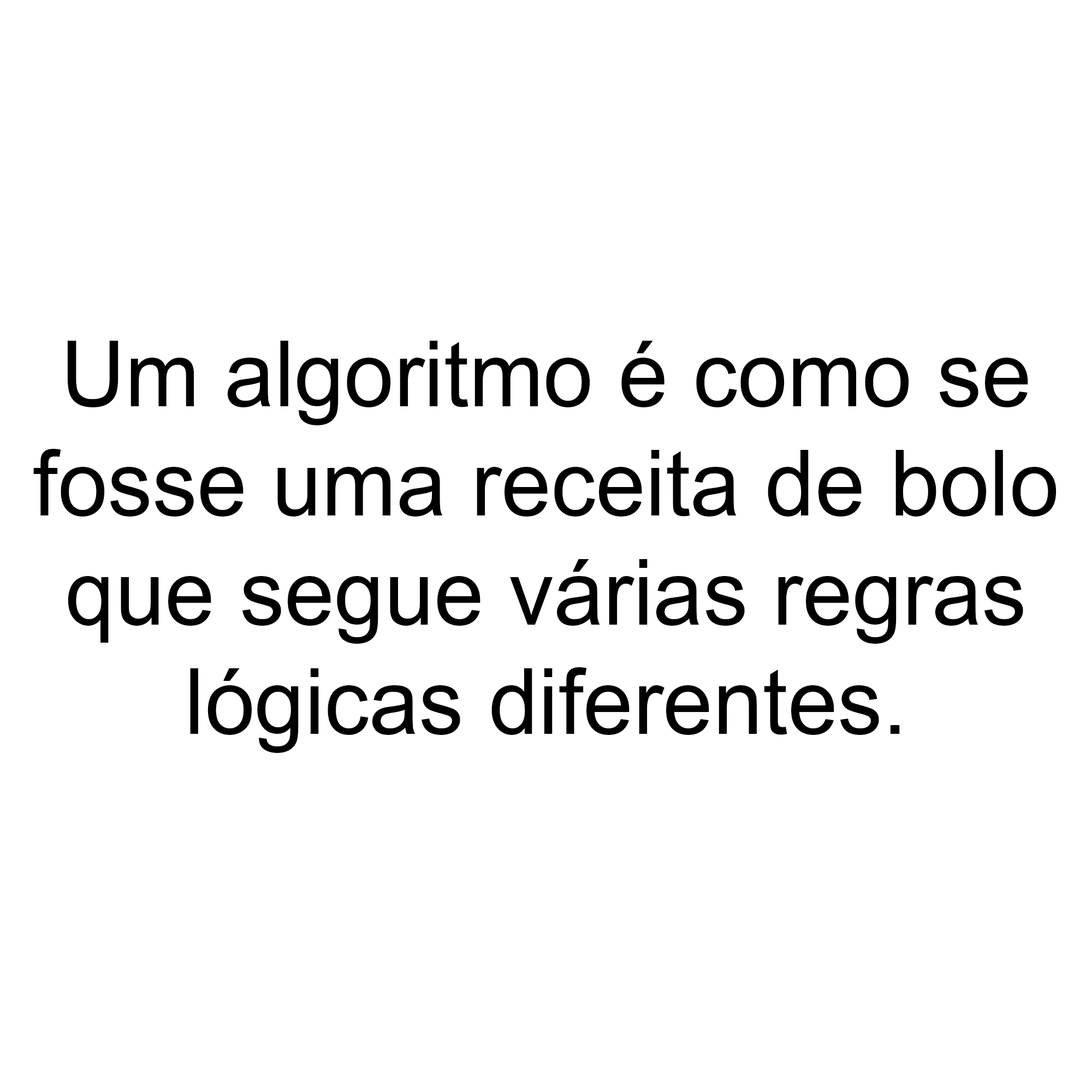
<style>
.page{position:relative;width:1092px;height:1092px;background:#ffffff}
.page>*{position:absolute;margin:0}
.t1{font:91px "ArialMT";color:#000000}
</style>
<div class="page">
<p class="t1" style="left:33px;top:341px;width:1023px;height:412px;text-align:center">Um algoritmo é como se<br>fosse uma receita de bolo<br>que segue várias regras<br>lógicas diferentes.</p>
</div>
